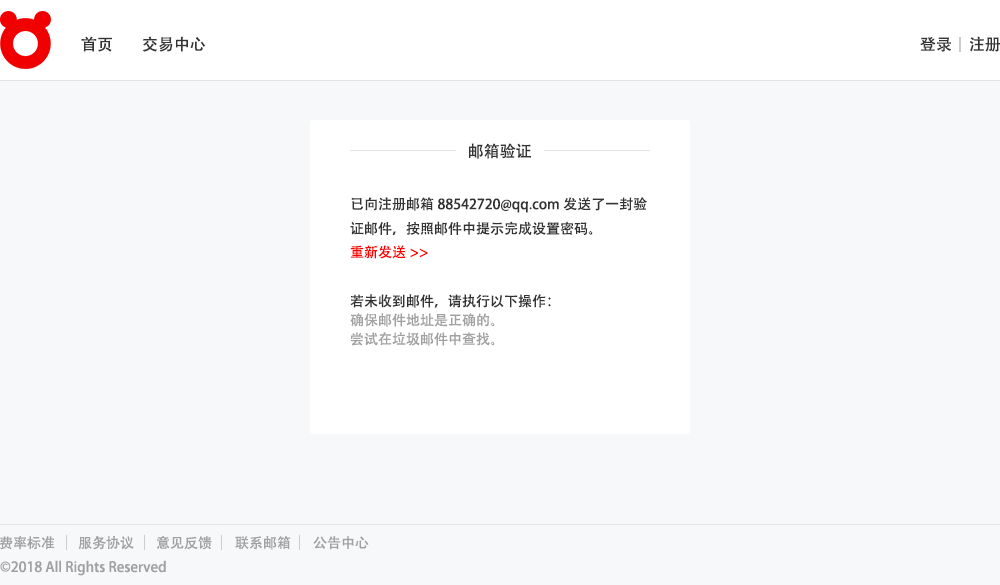
<style>
.page{position:relative;width:1000px;height:585px;background:#f6f8f9}
.page>*{position:absolute;margin:0}
.t1{font:16px "AdobeHeitiStd-Regular";color:#333333}
.t2{font:14px "AdobeHeitiStd-Regular";color:#333333}
.t3{font:14px "AdobeHeitiStd-Regular";color:#ff0000}
.t4{font:14px/19px "AdobeHeitiStd-Regular";color:#a1a1a1}
.t5{font:14px/19px "AdobeHeitiStd-Regular";color:#333333}
.t6{font:14px "AdobeHeitiStd-Regular";color:#a1a1a1}
</style>
<div class="page">
<p class="t1" style="left:81px;top:36px;width:31px;height:16px">首页</p>
<p class="t1" style="left:143px;top:36px;width:63px;height:16px">交易中心</p>
<p class="t1" style="left:920px;top:37px;width:31px;height:15px">登录</p>
<p class="t1" style="left:969px;top:36px;width:32px;height:16px">注册</p>
<p class="t1" style="left:469px;top:143px;width:62px;height:16px">邮箱验证</p>
<p class="t2" style="left:350px;top:197px;width:297px;height:39px">已向注册邮箱88542720@qq.com发送了一封验证邮件，按照邮件中提示完成设置密码。</p>
<p class="t3" style="left:350px;top:245px;width:78px;height:14px">重新发送&gt;&gt;</p>
<p class="t4" style="left:350px;top:294px;width:201px;height:52px"><span class="t5">若未收到邮件，请执行以下操作：<br></span>确保邮件地址是正确的。<br>尝试在垃圾邮件中查找。</p>
<p class="t6" style="left:0px;top:536px;width:55px;height:14px">费率标准</p>
<p class="t6" style="left:78px;top:536px;width:56px;height:14px">服务协议</p>
<p class="t6" style="left:157px;top:536px;width:55px;height:14px">意见反馈</p>
<p class="t6" style="left:235px;top:536px;width:56px;height:14px">联系邮箱</p>
<p class="t6" style="left:313px;top:536px;width:56px;height:14px">公告中心</p>
<p class="t6" style="left:0px;top:560px;width:166px;height:16px">©2018 All Rights Reserved</p>
</div>
